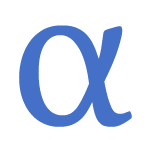
<style>
.page{position:relative;width:152px;height:152px;background:#ffffff}
.page>*{position:absolute;margin:0}
.t1{font:227px "Athelas-Regular";color:#4470c8}
</style>
<div class="page">
<p class="t1" style="left:19px;top:25px;width:113px;height:102px">α</p>
</div>
